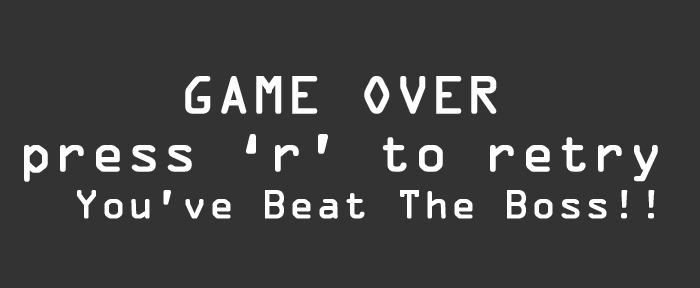
<style>
.page{position:relative;width:700px;height:288px;background:#333333}
.page>*{position:absolute;margin:0}
.t1{font:48px "OCRAStd";color:#ffffff;font-weight:bold}
.t2{font:36px "OCRAStd";color:#ffffff;font-weight:bold}
</style>
<div class="page">
<p class="t1" style="left:24px;top:76px;width:634px;height:106px;text-align:center">GAME OVER<br>press ‘r’ to retry</p>
<p class="t2" style="left:77px;top:190px;width:578px;height:29px">You’ve Beat The Boss!!</p>
</div>
